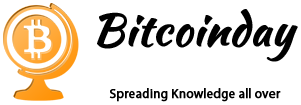
<style>
.page{position:relative;width:301px;height:105px;background:#ffffff}
.page>*{position:absolute;margin:0}
.t1{font:43.9px "KaushanScript-Regular";color:#010101;font-weight:bold}
.t2{font:12.9px "MyriadPro-Regular";color:#000000;font-weight:bold}
</style>
<div class="page">
<p class="t1" style="left:97px;top:9px;width:201px;height:53px">Bitcoinday</p>
<p class="t2" style="left:109px;top:88px;width:172px;height:14px">Spreading Knowledge all over</p>
</div>
